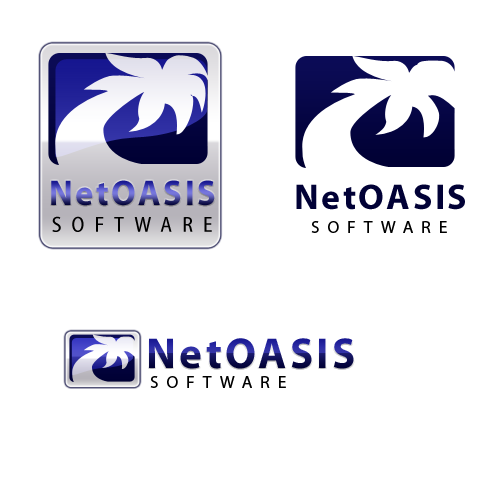
<style>
.page{position:relative;width:500px;height:500px;background:#ffffff}
.page>*{position:absolute;margin:0}
.t1{font:35.9px "MyriadPro-Bold";letter-spacing:0.075em;scale:0.96 1}
.t2{font:35.9px "MyriadPro-Bold";letter-spacing:0.075em;color:#010136}
.t3{font:21.6px "Myriad-CnWeb";letter-spacing:0.45em;color:#000000;scale:1.04 1}
.t4{font:17.5px "MyriadPro-Regular";letter-spacing:0.45em;color:#000000}
.t5{font:43.2px "MyriadPro-Bold";letter-spacing:0.075em}
</style>
<div class="page">
<p class="t1" style="left:51px;top:180px;width:164px;height:26px">NetOASIS</p>
<p class="t2" style="left:296px;top:184px;width:169px;height:26px">NetOASIS</p>
<p class="t3" style="left:52px;top:216px;width:160px;height:16px">SOFTWARE</p>
<p class="t4" style="left:311px;top:221px;width:136px;height:12px">SOFTWARE</p>
<p class="t5" style="left:149px;top:338px;width:205px;height:31px">NetOASIS</p>
<p class="t4" style="left:150px;top:376px;width:136px;height:12px">SOFTWARE</p>
</div>
